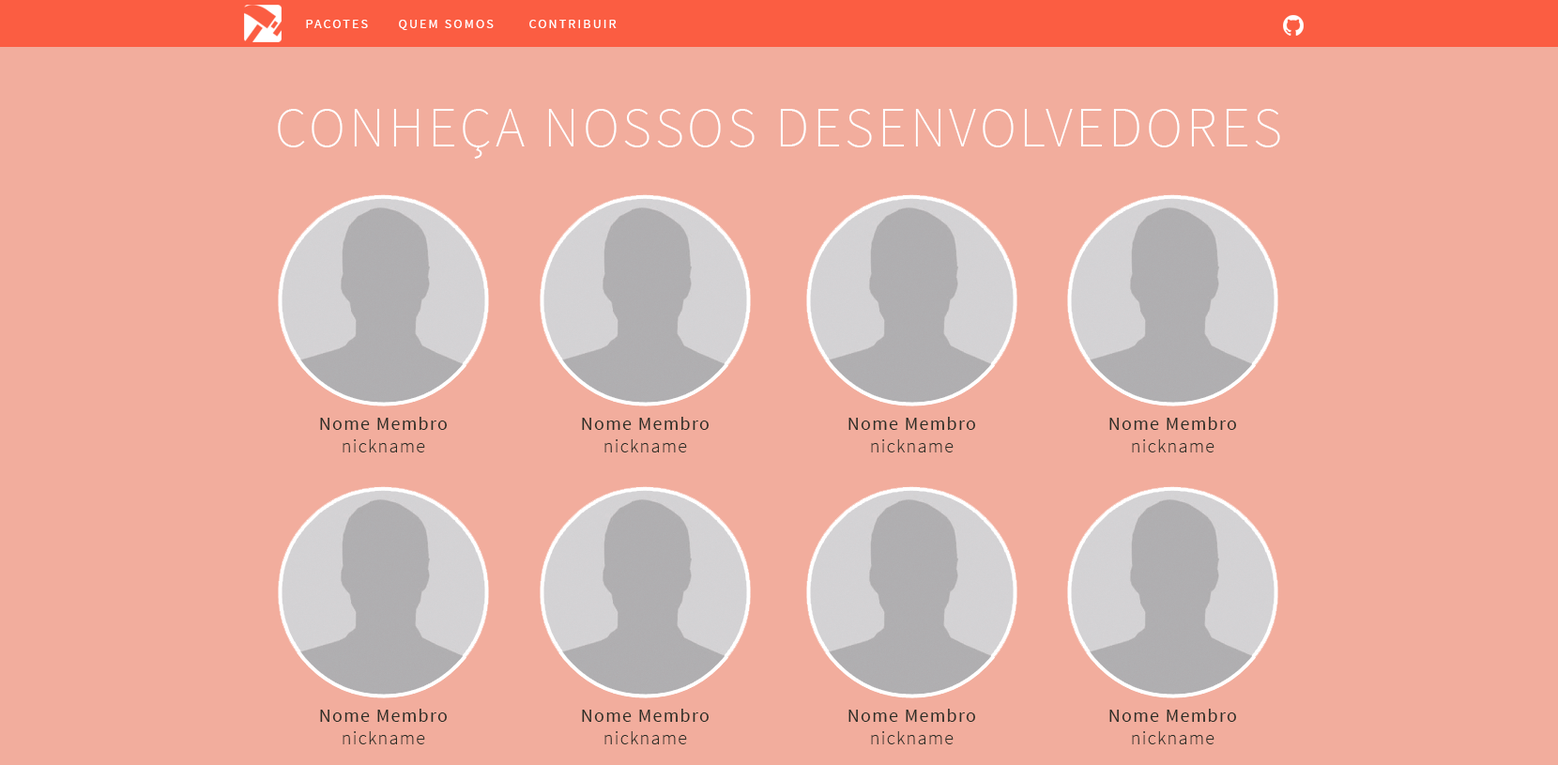
<style>
.page{position:relative;width:1558px;height:765px;background:#f2ad9d}
.page>*{position:absolute;margin:0}
.t1{font:13.1px "SourceSansPro-Regular";letter-spacing:0.15em;color:#ffffff}
.t2{font:56.3px "SourceSansPro-ExtraLight";letter-spacing:0.065em;color:#ffffff}
.t3{font:18.8px "SourceSansPro-Regular";letter-spacing:0.065em;color:#2b2d26}
.t4{font:18.8px "SourceSansPro-Light";letter-spacing:0.065em;color:#2b2d26}
</style>
<div class="page">
<p class="t1" style="left:306px;top:20px;width:62px;height:8px">PACOTES</p>
<p class="t1" style="left:399px;top:20px;width:95px;height:10px">QUEM SOMOS</p>
<p class="t1" style="left:529px;top:20px;width:88px;height:8px">CONTRIBUIR</p>
<p class="t2" style="left:278px;top:109px;width:1003px;height:50px">CONHEÇA NOSSOS DESENVOLVEDORES</p>
<p class="t3" style="left:320px;top:417px;width:127px;height:36px;text-align:center">Nome Membro<br><span class="t4">nickname</span></p>
<p class="t3" style="left:582px;top:417px;width:127px;height:36px;text-align:center">Nome Membro<br><span class="t4">nickname</span></p>
<p class="t3" style="left:849px;top:417px;width:126px;height:36px;text-align:center">Nome Membro<br><span class="t4">nickname</span></p>
<p class="t3" style="left:1110px;top:417px;width:126px;height:36px;text-align:center">Nome Membro<br><span class="t4">nickname</span></p>
<p class="t3" style="left:320px;top:709px;width:127px;height:35px;text-align:center">Nome Membro<br><span class="t4">nickname</span></p>
<p class="t3" style="left:582px;top:709px;width:127px;height:35px;text-align:center">Nome Membro<br><span class="t4">nickname</span></p>
<p class="t3" style="left:849px;top:709px;width:126px;height:35px;text-align:center">Nome Membro<br><span class="t4">nickname</span></p>
<p class="t3" style="left:1110px;top:709px;width:126px;height:35px;text-align:center">Nome Membro<br><span class="t4">nickname</span></p>
</div>
